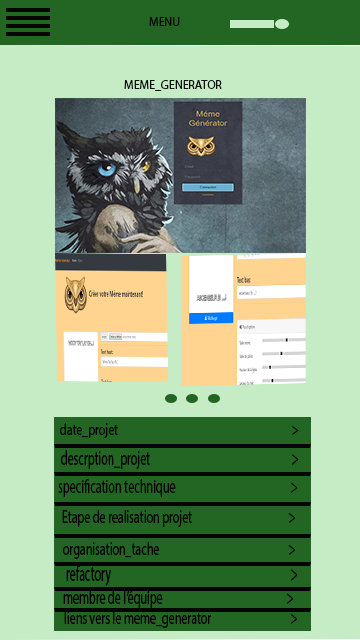
<style>
.page{position:relative;width:360px;height:640px;background:#c5ecc5}
.page>*{position:absolute;margin:0}
.t1{font:12px "MyriadPro-Regular";color:#060505}
.t2{font:12px "MyriadPro-Regular";color:#0d0e0d}
.t3{font:16.6px "MyriadPro-Regular";color:#000000;scale:0.72 1}
.t4{font:20.3px "MyriadPro-Regular";color:#000000;scale:0.59 1}
.t5{font:19.4px "MyriadPro-Regular";color:#000000;scale:0.63 1}
.t6{font:18.4px "MyriadPro-Regular";color:#000000;scale:0.65 1}
.t7{font:22.1px "MyriadPro-Regular";color:#000000;scale:0.54 1}
.t8{font:19.4px "MyriadPro-Regular";color:#000000;scale:0.62 1}
</style>
<div class="page">
<p class="t1" style="left:149px;top:17px;width:31px;height:9px">MENU</p>
<p class="t2" style="left:124px;top:80px;width:98px;height:11px">MEME_GENERATOR</p>
<p class="t3" style="left:60px;top:423px;width:239px;height:15px">date_projet                                                                     &gt;</p>
<p class="t4" style="left:61px;top:450px;width:237px;height:19px">descrption_projet                                                        &gt;</p>
<p class="t5" style="left:58px;top:479px;width:240px;height:18px">specification technique                                             &gt;</p>
<p class="t6" style="left:62px;top:510px;width:233px;height:17px">Etape de realisation projet                                      &gt;</p>
<p class="t6" style="left:63px;top:542px;width:232px;height:17px">organisation_tache                                                   &gt;</p>
<p class="t7" style="left:66px;top:565px;width:232px;height:21px">refactory                                                                       &gt;</p>
<p class="t8" style="left:63px;top:590px;width:231px;height:18px">membre de l’équipe                                                 &gt;</p>
<p class="t6" style="left:64px;top:611px;width:233px;height:17px">liens vers le meme_generator                               &gt;</p>
</div>
